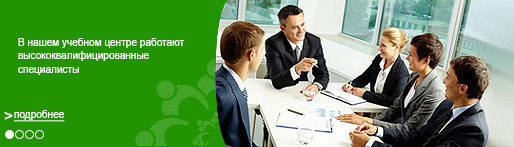
<style>
.page{position:relative;width:514px;height:147px;background:#229401}
.page>*{position:absolute;margin:0}
.t1{font:11.3px "ArialMT";letter-spacing:0.01em;color:#fefefe;scale:0.87 1}
.t2{font:15.6px "ArialMT";letter-spacing:0.01em;color:#fefefe;font-weight:bold;scale:0.94 1}
.t3{font:11.3px "ArialMT";letter-spacing:0.01em;color:#fefefe;text-decoration:underline;scale:0.87 1}
</style>
<div class="page">
<p class="t1" style="left:18px;top:38px;width:166px;height:37px">В нашем учебном центре работают<br>высококвалифицированные<br>специалисты</p>
<p class="t2" style="left:4px;top:112px;width:9px;height:8px">&gt;</p>
<p class="t3" style="left:14px;top:110px;width:51px;height:12px">подробнее</p>
</div>
